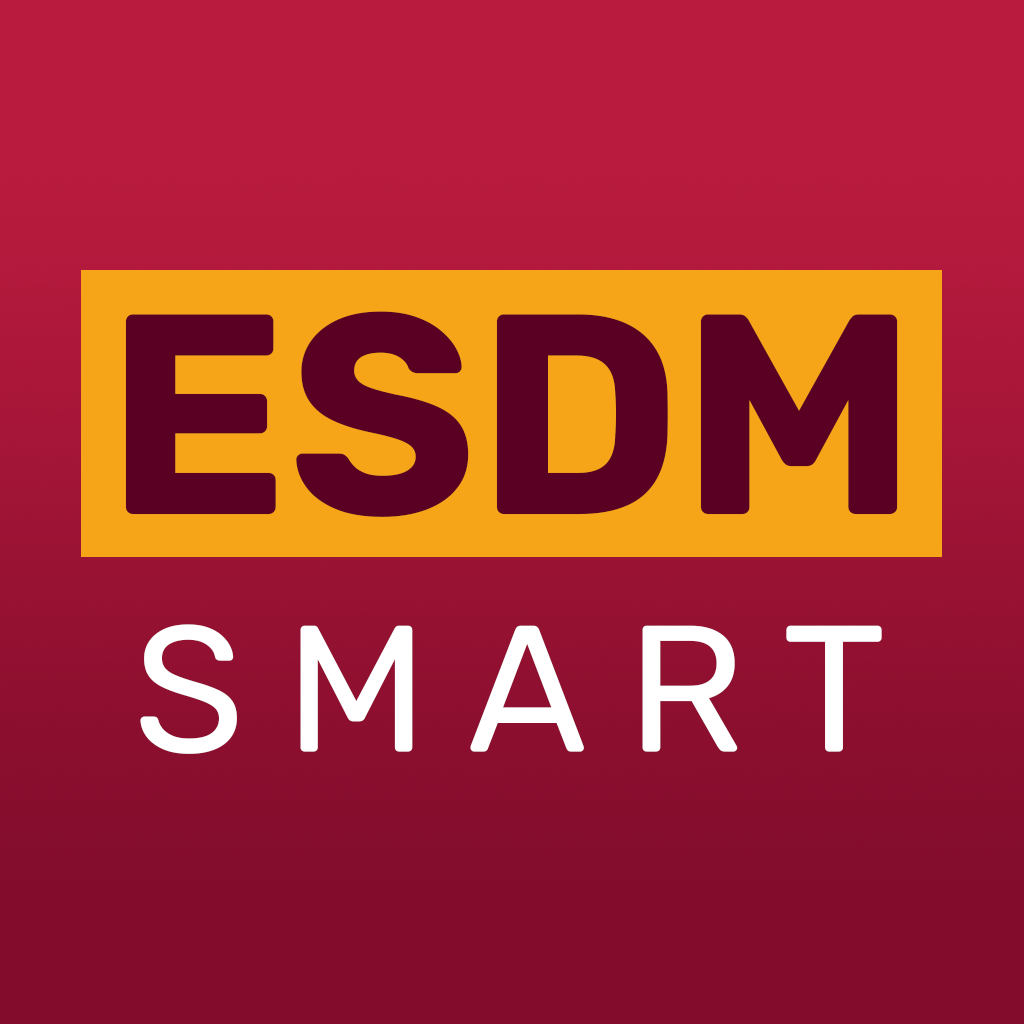
<style>
.page{position:relative;width:1024px;height:1024px}
.page>*{position:absolute;margin:0}
.t1{font:285.1px "RubikRoman-Bold";color:#590023}
.t2{font:179.7px "RubikRoman-Regular";letter-spacing:0.22em;color:#ffffff}
</style>
<div class="page">
<p class="t1" style="left:125px;top:311px;width:773px;height:206px">ESDM</p>
<p class="t2" style="left:140px;top:624px;width:742px;height:130px">SMART</p>
</div>
